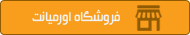
<style>
.page{position:relative;width:190px;height:35px;background:#f99d1c}
.page>*{position:absolute;margin:0}
.t1{font:15px "Mj_BeirutLtX3";color:#f1f2f2}
</style>
<div class="page">
<p class="t1" style="left:32px;top:9px;width:88px;height:16px">فروشگاه اورمیانت</p>
</div>
